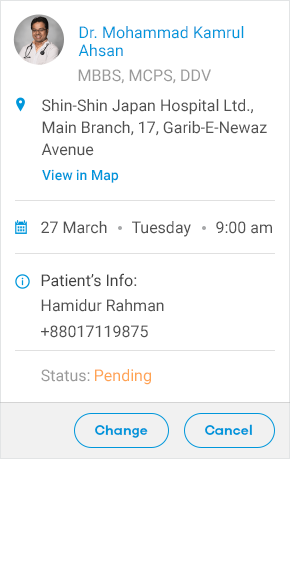
<style>
.page{position:relative;width:290px;height:566px;background:#ffffff}
.page>*{position:absolute;margin:0}
.t1{font:16px/18px "Roboto-Regular";letter-spacing:0.005em;color:#0097db}
.t2{font:16px "Roboto-Regular";letter-spacing:0.005em;color:#9a9a9a}
.t3{font:16px/22px "Roboto-Regular";color:#515151}
.t4{font:14px "Roboto-Medium";color:#0097db}
.t5{font:16px "Roboto-Regular";color:#515151}
.t6{font:16px "Roboto-Regular";color:#404040}
.t7{font:16px "Roboto-Regular";color:#9a9a9a}
.t8{font:16px "Roboto-Regular";color:#ffa352}
.t9{font:14px "GalanoGrotesque-SemiBold";color:#0097db}
</style>
<div class="page">
<p class="t1" style="left:78px;top:26px;width:166px;height:31px">Dr. Mohammad Kamrul Ahsan</p>
<p class="t2" style="left:78px;top:69px;width:133px;height:15px">MBBS, MCPS, DDV</p>
<p class="t3" style="left:41px;top:99px;width:226px;height:57px;text-align:right">Shin-Shin Japan Hospital Ltd., Main Branch, 17, Garib-E-Newaz Avenue</p>
<p class="t4" style="left:42px;top:169px;width:77px;height:14px">View in Map</p>
<p class="t5" style="left:41px;top:221px;width:66px;height:13px">27 March 2017</p>
<p class="t5" style="left:132px;top:221px;width:59px;height:16px">Tuesday</p>
<p class="t5" style="left:216px;top:221px;width:56px;height:13px">9:00 am</p>
<p class="t6" style="left:41px;top:273px;width:96px;height:14px">Patient’s Info:</p>
<p class="t5" style="left:41px;top:299px;width:123px;height:13px">Hamidur Rahman</p>
<p class="t5" style="left:41px;top:325px;width:107px;height:13px">+8801711987564</p>
<p class="t7" style="left:41px;top:369px;width:49px;height:13px">Status:</p>
<p class="t8" style="left:95px;top:369px;width:56px;height:16px">Pending</p>
<p class="t9" style="left:95px;top:425px;width:53px;height:13px">Change</p>
<p class="t9" style="left:205px;top:424px;width:47px;height:11px">Cancel</p>
</div>
